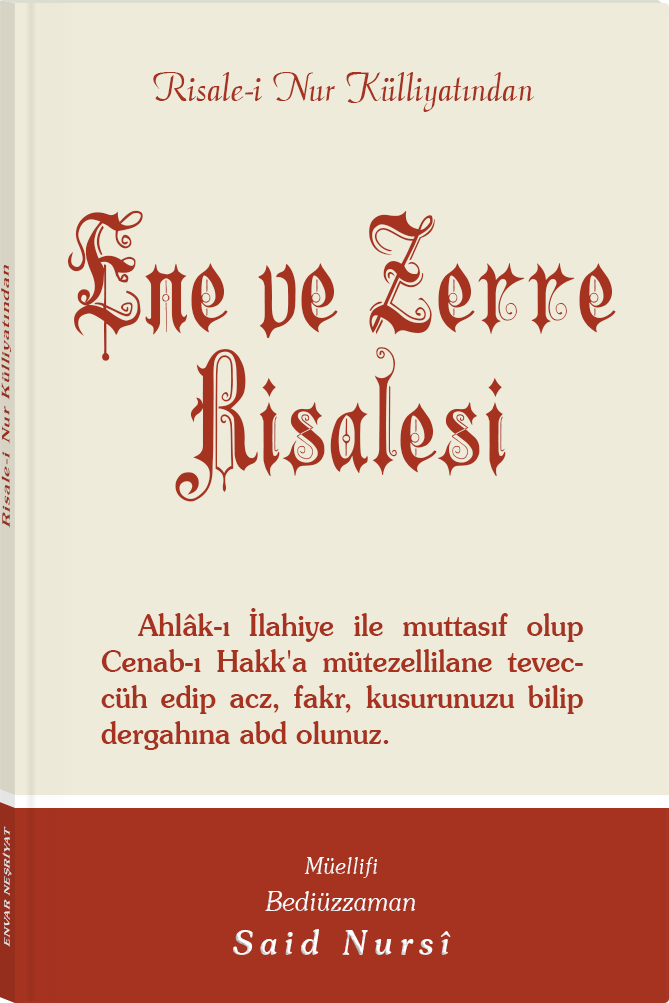
<style>
.page{position:relative;width:669px;height:1003px;background:#efebdb}
.page>*{position:absolute;margin:0}
.t1{font:45.3px "Barla © 072 Aria ScriptScriptSSi";color:#a63320;scale:0.94 1}
.t2{font:157.1px/140.2px "Barla © 001 Liva Nur";letter-spacing:-0.001em;color:#a63320;scale:0.92 1}
.t3{font:11.4px "Souvenir-Medium";letter-spacing:0.08em;color:#a63320;scale:1.65 1}
.t4{font:30.3px/36px "Souvenir-Medium";color:#a63320;scale:0.92 1}
.t5{font:8.3px "Souvenir-Medium";letter-spacing:0.08em;color:#e5e5e5;scale:1.43 1}
.t6{font:27.1px/37.8px "Souvenir-LightItalic";color:#ffffff;scale:0.92 1}
.t7{font:22.8px/39.8px "Souvenir-LightItalic";color:#ffffff;scale:0.92 1}
.t8{font:33.9px/43.8px "Souvenir-MediumItalic";letter-spacing:0.2em;color:#ffffff;scale:0.92 1}
</style>
<div class="page">
<p class="t1" style="left:153px;top:72px;width:381px;height:40px">Risale-i Nur Külliyatından</p>
<p class="t2" style="left:68px;top:210px;width:548px;height:292px;text-align:center">Ene ve Zerre<br>Risalesi</p>
<p class="t3" style="left:1px;top:265px;width:10px;height:263px;rotate:-90deg">Risale-i Nur Külliyatından</p>
<p class="t4" style="left:101px;top:608px;width:482px;height:142px;text-align:justify">Ahlâk-ı İlahiye ile muttasıf olup Cenab-ı Hakk'a mütezellilane teveccüh edip acz, fakr, kusurunuzu bilip dergahına abd olunuz.</p>
<p class="t5" style="left:2px;top:826px;width:10px;height:121px;rotate:-90deg">ENVAR NEŞRİYAT</p>
<p class="t6" style="left:233px;top:857px;width:218px;height:98px;text-align:center"><span class="t7">Müellifi<br></span>Bediüzzaman<br><span class="t8">Said Nursî</span></p>
</div>
